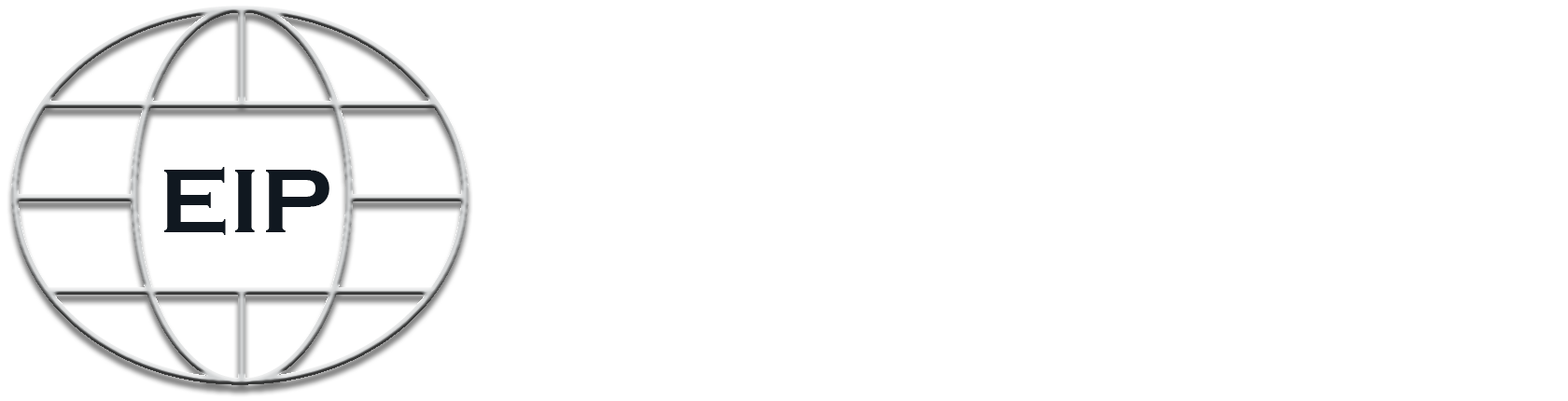
<style>
.page{position:relative;width:1568px;height:401px;background:#ffffff}
.page>*{position:absolute;margin:0}
.t1{font:93.3px "CopperplateGothic-Bold";color:#101820}
</style>
<div class="page">
<p class="t1" style="left:164px;top:167px;width:165px;height:68px">EIP</p>
</div>
